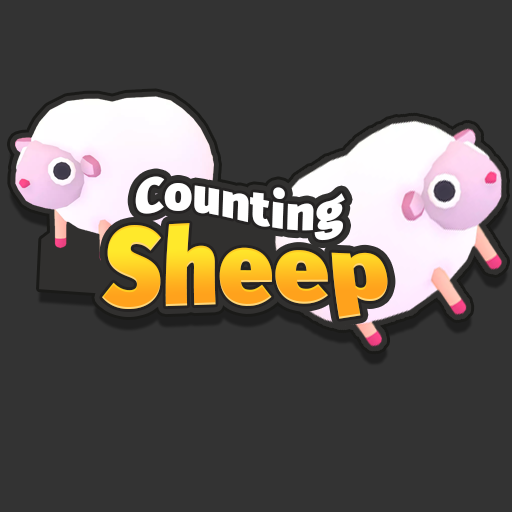
<style>
.page{position:relative;width:512px;height:512px;background:#333333}
.page>*{position:absolute;margin:0}
.t1{font:48.6px "FiraSans-Ultra";letter-spacing:0.025em;color:#ffffff}
.t2{font:77.8px "FiraSans-Ultra";letter-spacing:0.01em;scale:1.25 1}
</style>
<div class="page">
<p class="t1" style="left:135px;top:176px;width:210px;height:65px;rotate:2deg">Сounting</p>
<p class="t2" style="left:102px;top:223px;width:286px;height:96px">Sheep</p>
</div>
